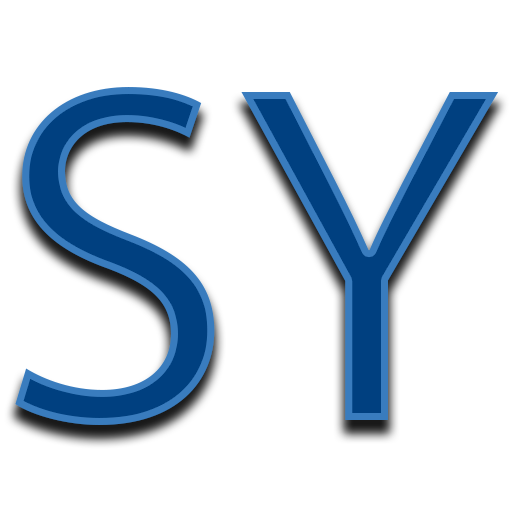
<style>
.page{position:relative;width:512px;height:512px;background:#ffffff}
.page>*{position:absolute;margin:0}
.t1{font:487.1px "MyriadPro-Regular"}
</style>
<div class="page">
<p class="t1" style="left:15px;top:87px;width:484px;height:338px">SY</p>
</div>
